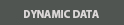
<style>
.page{position:relative;width:124px;height:25px;background:#505551}
.page>*{position:absolute;margin:0}
.t1{font:11px "MyriadHebrew-Bold";color:#dad6d6}
</style>
<div class="page">
<p class="t1" style="left:24px;top:10px;width:75px;height:8px">DYNAMIC DATA</p>
</div>
